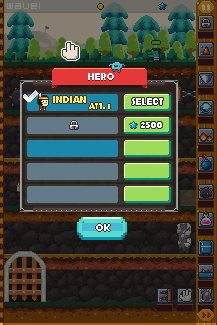
<style>
.page{position:relative;width:217px;height:325px}
.page>*{position:absolute;margin:0}
.t1{font:10.2px "BitDustTwo";color:#858585}
.t2{font:10.4px "BerlinSansFBDemi-Bold";color:#ffec4f}
.t3{font:10.4px "BerlinSansFBDemi-Bold";color:#fcfbf6}
</style>
<div class="page">
<p class="t1" style="left:7px;top:3px;width:33px;height:6px">wave1</p>
<p class="t2" style="left:53px;top:96px;width:33px;height:7px">INDIAN</p>
<p class="t3" style="left:132px;top:98px;width:31px;height:7px">SELECT</p>
<p class="t3" style="left:141px;top:122px;width:21px;height:6px">2500</p>
</div>
